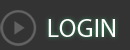
<style>
.page{position:relative;width:130px;height:50px;background:#333333}
.page>*{position:absolute;margin:0}
.t1{font:26px "MyriadPro-Regular";color:#ffffff;text-transform:uppercase}
</style>
<div class="page">
<p class="t1" style="left:48px;top:19px;width:67px;height:18px">LOGIN</p>
</div>
